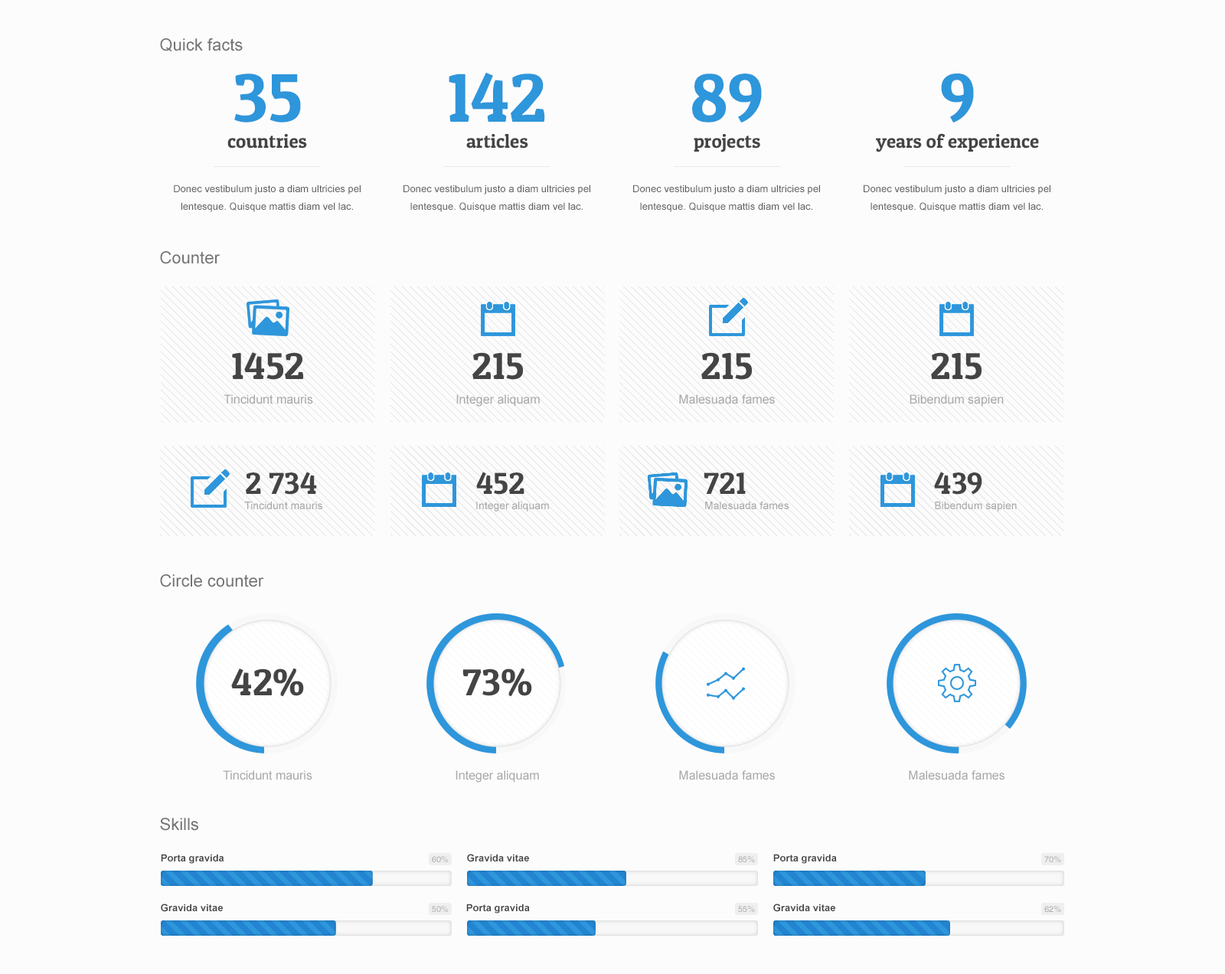
<style>
.page{position:relative;width:1225px;height:974px;background:#fcfcfc}
.page>*{position:absolute;margin:0}
.t1{font:16.8px "ArialMT";color:#737373}
.t2{font:68.9px "PatuaOne-Regular";color:#2e96db}
.t3{font:69px "PatuaOne-Regular";color:#2e96db}
.t4{font:19.1px "PatuaOne-Regular";color:#444444}
.t5{font:9.9px/17.6px "ArialMT";color:#626262}
.t6{font:10px/17.6px "ArialMT";color:#626262}
.t7{font:37.5px "PatuaOne-Regular";color:#444444}
.t8{font:12.2px "ArialMT";color:#a8a8a8}
.t9{font:30.6px "PatuaOne-Regular";color:#444444}
.t10{font:10.7px "ArialMT";color:#a8a8a8}
.t11{font:12.3px "ArialMT";color:#a8a8a8}
.t12{font:10px "Arial-BoldMT";color:#444444}
.t13{font:8.4px "HelveticaWorld-Regular";color:#a8a8a8}
</style>
<div class="page">
<p class="t1" style="left:160px;top:38px;width:83px;height:14px">Quick facts</p>
<p class="t2" style="left:234px;top:73px;width:67px;height:49px">35</p>
<p class="t2" style="left:449px;top:72px;width:96px;height:50px">142</p>
<p class="t2" style="left:692px;top:73px;width:70px;height:49px">89</p>
<p class="t3" style="left:941px;top:73px;width:33px;height:49px">9</p>
<p class="t4" style="left:227px;top:134px;width:80px;height:14px">countries</p>
<p class="t4" style="left:466px;top:134px;width:62px;height:14px">articles</p>
<p class="t4" style="left:693px;top:134px;width:67px;height:18px">projects</p>
<p class="t4" style="left:876px;top:133px;width:163px;height:19px">years of experience</p>
<p class="t5" style="left:174px;top:184px;width:187px;height:28px;text-align:center">Donec vestibulum justo a diam ultricies pel lentesque. Quisque mattis diam vel lac.</p>
<p class="t5" style="left:403px;top:184px;width:187px;height:28px;text-align:center">Donec vestibulum justo a diam ultricies pel lentesque. Quisque mattis diam vel lac.</p>
<p class="t5" style="left:633px;top:184px;width:187px;height:28px;text-align:center">Donec vestibulum justo a diam ultricies pel lentesque. Quisque mattis diam vel lac.</p>
<p class="t6" style="left:863px;top:184px;width:187px;height:28px;text-align:center">Donec vestibulum justo a diam ultricies pel lentesque. Quisque mattis diam vel lac.</p>
<p class="t1" style="left:160px;top:251px;width:60px;height:13px">Counter</p>
<p class="t7" style="left:232px;top:352px;width:71px;height:28px">1452</p>
<p class="t7" style="left:472px;top:352px;width:52px;height:28px">215</p>
<p class="t7" style="left:701px;top:352px;width:51px;height:28px">215</p>
<p class="t7" style="left:931px;top:352px;width:51px;height:28px">215</p>
<p class="t8" style="left:224px;top:394px;width:89px;height:10px">Tincidunt mauris</p>
<p class="t8" style="left:456px;top:394px;width:84px;height:12px">Integer aliquam</p>
<p class="t8" style="left:679px;top:394px;width:96px;height:10px">Malesuada fames</p>
<p class="t8" style="left:909px;top:394px;width:94px;height:12px">Bibendum sapien</p>
<p class="t9" style="left:246px;top:472px;width:71px;height:22px">2 734</p>
<p class="t9" style="left:476px;top:472px;width:48px;height:22px">452</p>
<p class="t9" style="left:703px;top:472px;width:43px;height:22px">721</p>
<p class="t9" style="left:934px;top:472px;width:48px;height:22px">439</p>
<p class="t10" style="left:244px;top:501px;width:78px;height:8px">Tincidunt mauris</p>
<p class="t10" style="left:476px;top:501px;width:73px;height:10px">Integer aliquam</p>
<p class="t10" style="left:705px;top:501px;width:84px;height:8px">Malesuada fames</p>
<p class="t10" style="left:935px;top:501px;width:82px;height:10px">Bibendum sapien</p>
<p class="t1" style="left:160px;top:574px;width:104px;height:13px">Circle counter</p>
<p class="t7" style="left:231px;top:667px;width:73px;height:30px">42%</p>
<p class="t7" style="left:462px;top:667px;width:70px;height:30px">73%</p>
<p class="t11" style="left:223px;top:770px;width:89px;height:10px">Tincidunt mauris</p>
<p class="t11" style="left:455px;top:770px;width:84px;height:12px">Integer aliquam</p>
<p class="t11" style="left:679px;top:770px;width:96px;height:10px">Malesuada fames</p>
<p class="t11" style="left:909px;top:770px;width:95px;height:10px">Malesuada fames</p>
<p class="t1" style="left:160px;top:817px;width:38px;height:14px">Skills</p>
<p class="t12" style="left:161px;top:853px;width:63px;height:10px">Porta gravida</p>
<p class="t13" style="left:432px;top:856px;width:17px;height:6px">60%</p>
<p class="t12" style="left:467px;top:853px;width:62px;height:9px">Gravida vitae</p>
<p class="t13" style="left:738px;top:856px;width:17px;height:6px">85%</p>
<p class="t12" style="left:773px;top:853px;width:64px;height:10px">Porta gravida</p>
<p class="t13" style="left:1044px;top:856px;width:17px;height:6px">70%</p>
<p class="t12" style="left:161px;top:903px;width:62px;height:9px">Gravida vitae</p>
<p class="t13" style="left:432px;top:906px;width:17px;height:6px">50%</p>
<p class="t12" style="left:466px;top:903px;width:64px;height:10px">Porta gravida</p>
<p class="t13" style="left:738px;top:906px;width:17px;height:6px">55%</p>
<p class="t12" style="left:773px;top:903px;width:62px;height:9px">Gravida vitae</p>
<p class="t13" style="left:1044px;top:906px;width:17px;height:6px">62%</p>
</div>
